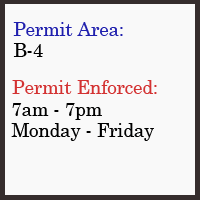
<style>
.page{position:relative;width:200px;height:200px;background:#f9f9f9}
.page>*{position:absolute;margin:0}
.t1{font:18.5px "CenturySchoolbook";color:#1f1fae}
.t2{font:18.5px "CenturySchoolbook";color:#000000}
.t3{font:18.5px "CenturySchoolbook";color:#d43333}
</style>
<div class="page">
<p class="t1" style="left:13px;top:22px;width:110px;height:14px">Permit Area:</p>
<p class="t2" style="left:13px;top:43px;width:30px;height:14px">B-4</p>
<p class="t3" style="left:12px;top:80px;width:145px;height:14px">Permit Enforced:</p>
<p class="t2" style="left:12px;top:103px;width:90px;height:17px">7am - 7pm</p>
<p class="t2" style="left:11px;top:123px;width:143px;height:18px">Monday - Friday</p>
</div>
